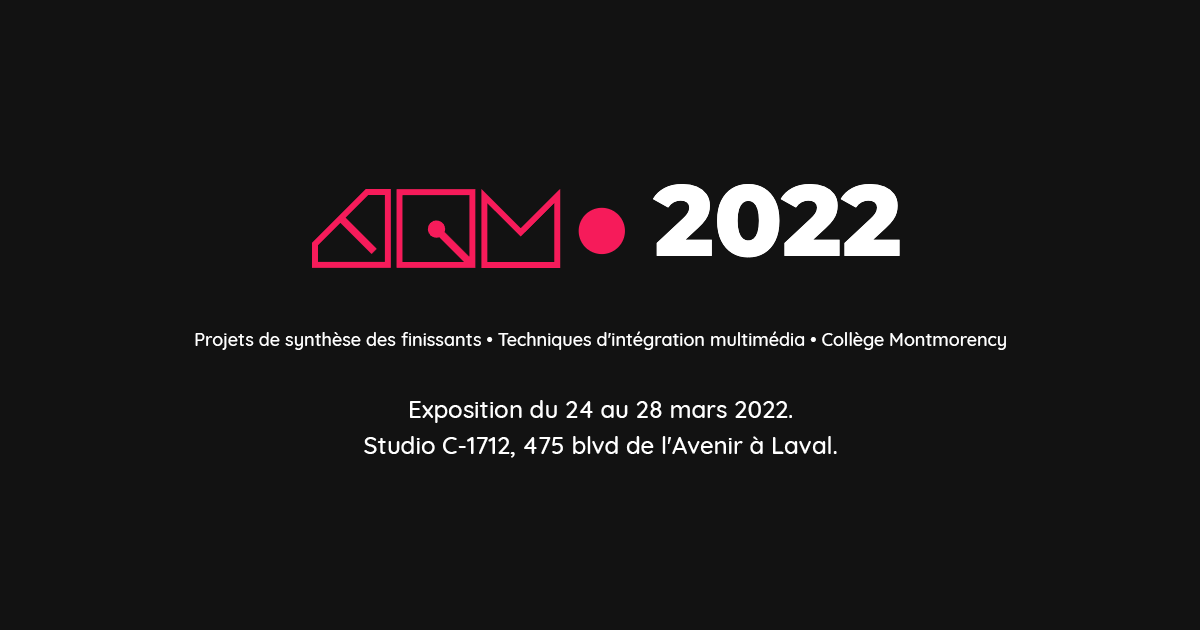
<style>
.page{position:relative;width:1200px;height:630px;background:#121212}
.page>*{position:absolute;margin:0}
.t1{font:18px/36px "Quicksand-Medium";color:#ffffff}
.t2{font:24px/36px "Quicksand-Medium";color:#ffffff}
</style>
<div class="page">
<p class="t1" style="left:195px;top:331px;width:811px;height:127px;text-align:center">Projets de synthèse des finissants • Techniques d'intégration multimédia • Collège Montmorency<br><br><span class="t2">Exposition du 24 au 28 mars 2022. <br>Studio C-1712, 475 blvd de l'Avenir à Laval.</span></p>
</div>
